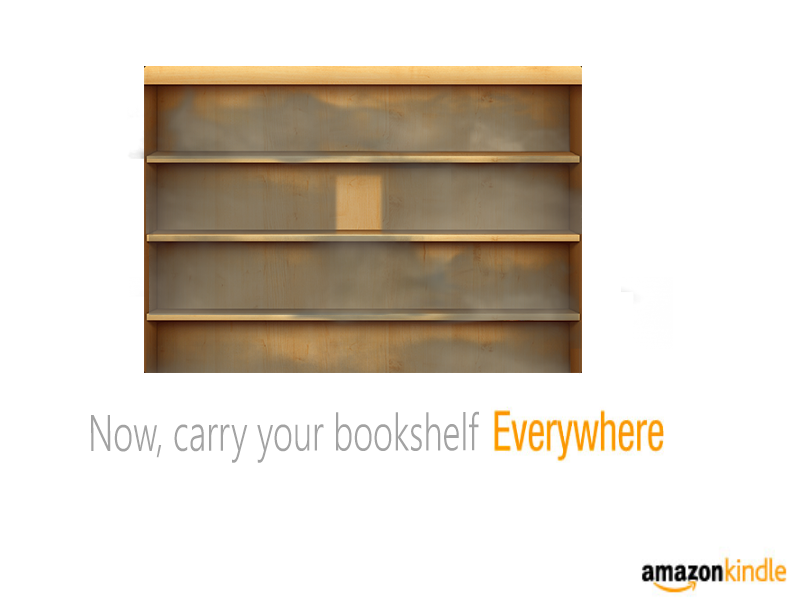
<style>
.page{position:relative;width:800px;height:600px;background:#ffffff}
.page>*{position:absolute;margin:0}
.t1{font:51.4px "SegoeUI-Semilight";color:#a3a3a3;scale:0.68 1}
</style>
<div class="page">
<p class="t1" style="left:91px;top:411px;width:388px;height:52px">Now, carry your bookshelf</p>
</div>
